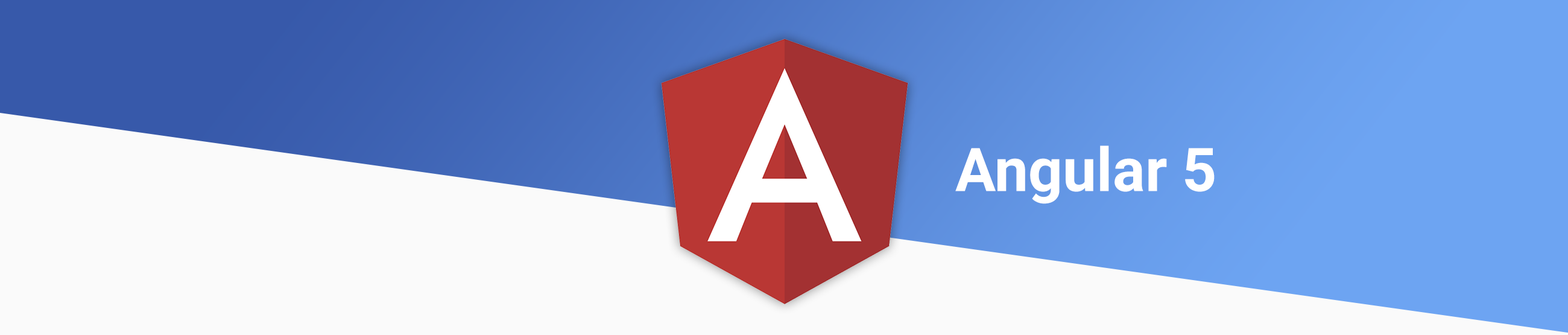
<style>
.page{position:relative;width:1568px;height:335px;background:#fafafa}
.page>*{position:absolute;margin:0}
.t1{font:60.3px "Roboto-Bold";color:#ffffff}
</style>
<div class="page">
<p class="t1" style="left:955px;top:145px;width:260px;height:59px">Angular 5</p>
</div>
